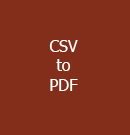
<style>
.page{position:relative;width:130px;height:135px;background:#822e1a}
.page>*{position:absolute;margin:0}
.t1{font:12px "Tahoma";color:#fcfcfa}
</style>
<div class="page">
<p class="t1" style="left:49px;top:40px;width:29px;height:51px;text-align:center">CSV<br>to<br>PDF</p>
</div>
